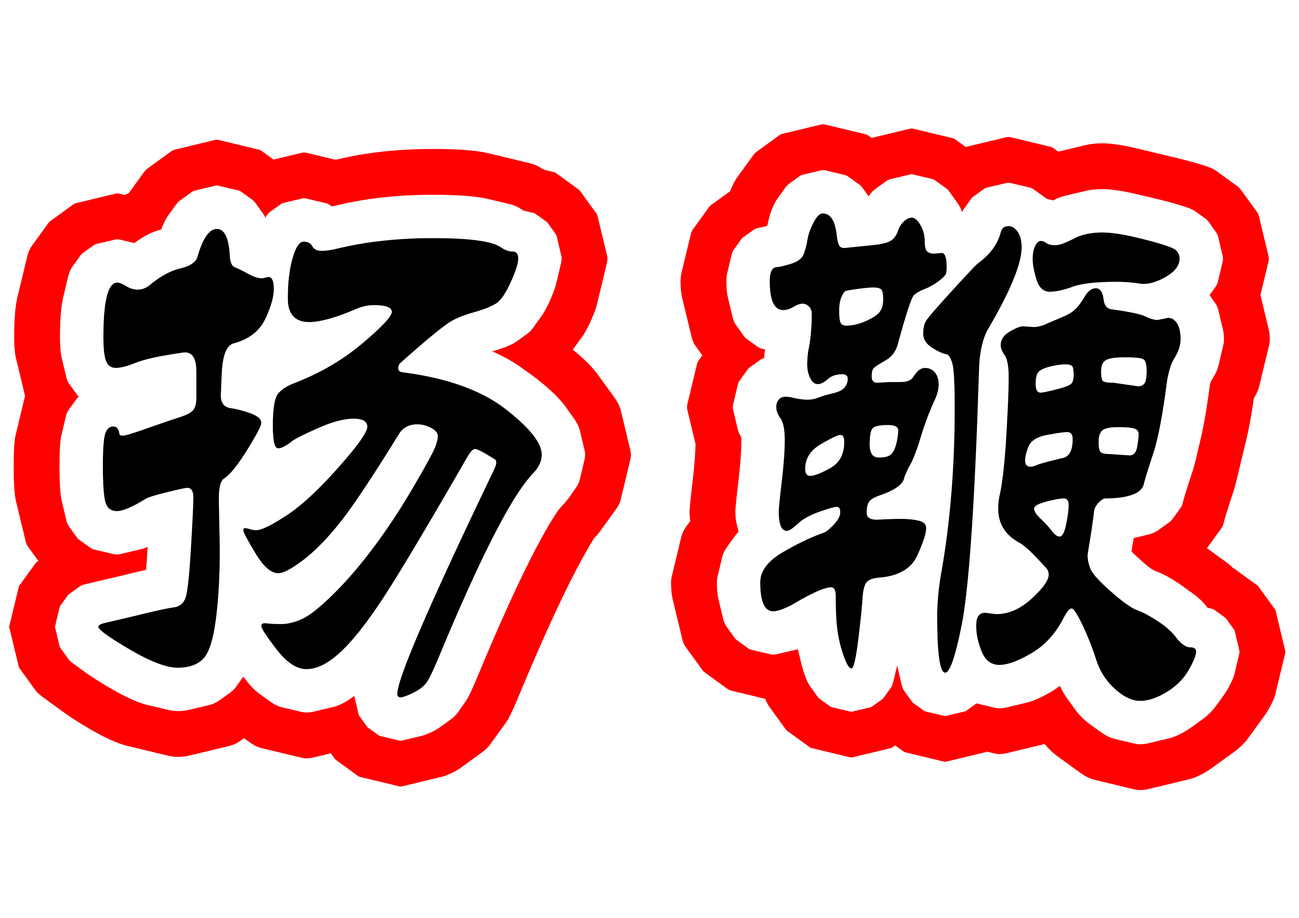
<style>
.page{position:relative;width:1299px;height:918px;background:#ffffff}
.page>*{position:absolute;margin:0}
.t1{font:705.6px "STLiti";letter-spacing:0.32em;color:#000000;scale:0.71 1}
</style>
<div class="page">
<p class="t1" style="left:98px;top:213px;width:1098px;height:488px">扬鞭</p>
</div>
